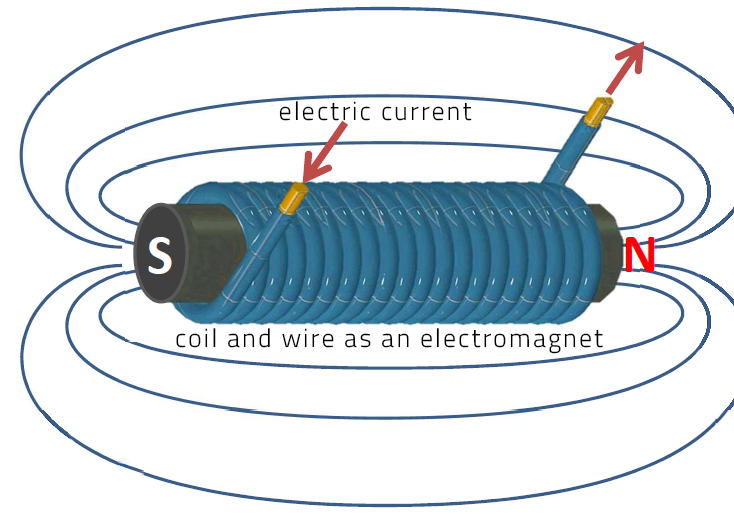
<style>
.page{position:relative;width:734px;height:514px;background:#ffffff}
.page>*{position:absolute;margin:0}
.t1{font:26px "TitilliumWeb-Light";letter-spacing:0.08em;color:#000000}
</style>
<div class="page">
<p class="t1" style="left:279px;top:101px;width:193px;height:20px">electric current</p>
<p class="t1" style="left:176px;top:328px;width:427px;height:26px">coil and wire as an electromagnet</p>
</div>
